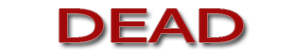
<style>
.page{position:relative;width:300px;height:50px;background:#ffffff}
.page>*{position:absolute;margin:0}
.t1{font:46.3px "Tahoma";color:#a40a0a;scale:1.65 1}
</style>
<div class="page">
<p class="t1" style="left:59px;top:9px;width:185px;height:33px">DEAD</p>
</div>
